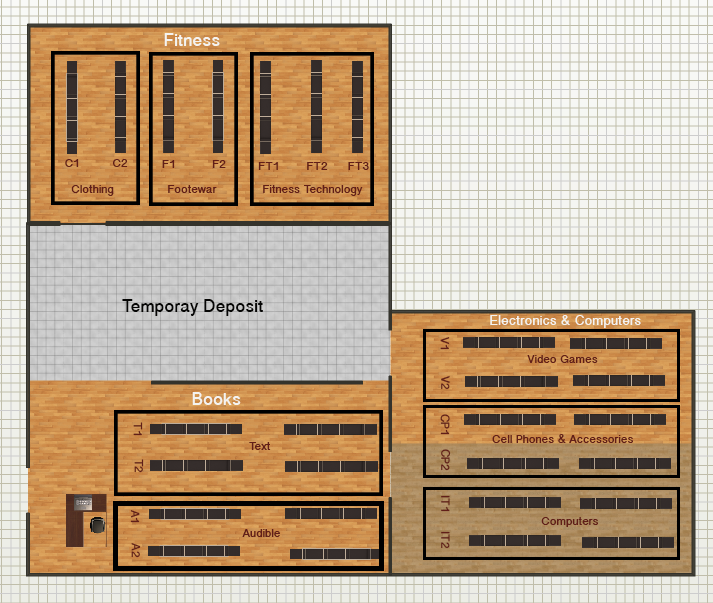
<style>
.page{position:relative;width:713px;height:603px}
.page>*{position:absolute;margin:0}
.t1{font:18px "MalayalamSangamMN-Bold";color:#f4f3f0}
.t2{font:12px "MalayalamSangamMN-Bold";color:#611e18}
.t3{font:18px "MalayalamSangamMN-Bold";color:#060605}
.t4{font:14px "MalayalamSangamMN-Bold";color:#f4f3f0}
</style>
<div class="page">
<p class="t1" style="left:164px;top:33px;width:56px;height:13px">Fitness</p>
<p class="t2" style="left:65px;top:159px;width:14px;height:8px">C1</p>
<p class="t2" style="left:113px;top:159px;width:15px;height:8px">C2</p>
<p class="t2" style="left:162px;top:160px;width:13px;height:8px">F1</p>
<p class="t2" style="left:212px;top:160px;width:14px;height:8px">F2</p>
<p class="t2" style="left:258px;top:162px;width:20px;height:8px">FT1</p>
<p class="t2" style="left:307px;top:162px;width:21px;height:8px">FT2</p>
<p class="t2" style="left:348px;top:162px;width:21px;height:8px">FT3</p>
<p class="t2" style="left:71px;top:185px;width:43px;height:11px">Clothing</p>
<p class="t2" style="left:168px;top:185px;width:49px;height:8px">Footewar</p>
<p class="t2" style="left:263px;top:185px;width:100px;height:11px">Fitness Technology</p>
<p class="t3" style="left:122px;top:299px;width:141px;height:17px">Temporay Deposit</p>
<p class="t4" style="left:490px;top:315px;width:151px;height:13px">Electronics &amp; Computers</p>
<p class="t2" style="left:440px;top:337px;width:10px;height:13px;rotate:90deg">V1</p>
<p class="t2" style="left:527px;top:355px;width:71px;height:8px">Video Games</p>
<p class="t2" style="left:441px;top:375px;width:9px;height:15px;rotate:90deg">V2</p>
<p class="t1" style="left:192px;top:392px;width:49px;height:13px">Books</p>
<p class="t2" style="left:440px;top:414px;width:10px;height:21px;rotate:90deg">CP1</p>
<p class="t2" style="left:133px;top:422px;width:10px;height:14px;rotate:90deg">T1</p>
<p class="t2" style="left:492px;top:434px;width:141px;height:9px">Cell Phones &amp; Accessories</p>
<p class="t2" style="left:249px;top:442px;width:22px;height:8px">Text</p>
<p class="t2" style="left:441px;top:449px;width:10px;height:22px;rotate:91deg">CP2</p>
<p class="t2" style="left:134px;top:459px;width:10px;height:14px;rotate:90deg">T2</p>
<p class="t2" style="left:441px;top:495px;width:9px;height:17px;rotate:90deg">IT1</p>
<p class="t2" style="left:130px;top:510px;width:10px;height:13px;rotate:91deg">A1</p>
<p class="t2" style="left:541px;top:517px;width:57px;height:10px">Computers</p>
<p class="t2" style="left:242px;top:529px;width:38px;height:8px">Audible</p>
<p class="t2" style="left:441px;top:531px;width:9px;height:18px;rotate:90deg">IT2</p>
<p class="t2" style="left:131px;top:543px;width:10px;height:15px;rotate:90deg">A2</p>
</div>
